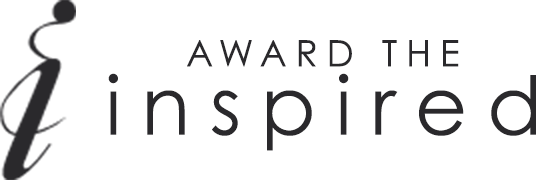
<style>
.page{position:relative;width:536px;height:180px;background:#ffffff}
.page>*{position:absolute;margin:0}
.t1{font:36.4px "CenturyGothic";letter-spacing:0.25em;color:#2a292c;text-transform:uppercase}
.t2{font:80.9px "CenturyGothic";letter-spacing:0.245em;color:#2a292c}
</style>
<div class="page">
<p class="t1" style="left:187px;top:40px;width:272px;height:27px">award the</p>
<p class="t2" style="left:108px;top:73px;width:428px;height:78px">inspired</p>
</div>
